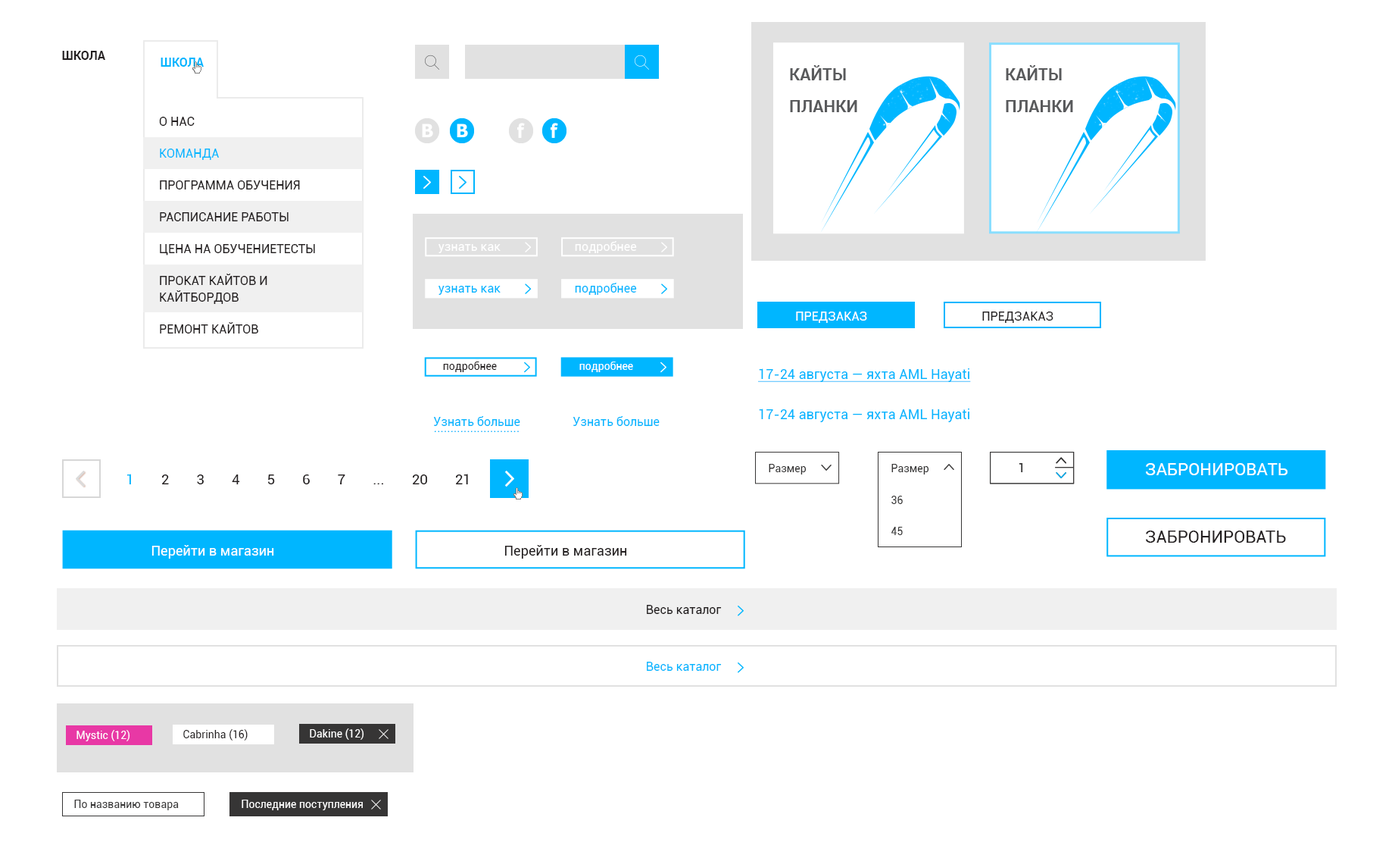
<style>
.page{position:relative;width:1395px;height:855px;background:#ffffff}
.page>*{position:absolute;margin:0}
.t1{font:12.1px "Roboto-Bold";letter-spacing:0.005em;color:#231f20;text-transform:uppercase}
.t2{font:12.1px "Roboto-Bold";letter-spacing:0.005em;color:#00b6ff;text-transform:uppercase}
.t3{font:16.7px/31.8px "Roboto-Bold";letter-spacing:0.005em;color:#595a5c;text-transform:uppercase}
.t4{font:12.1px/31.8px "Roboto-Regular";letter-spacing:0.005em;color:#231f20;text-transform:uppercase}
.t5{font:12.1px/31.8px "Roboto-Regular";letter-spacing:0.005em;color:#00b6ff;text-transform:uppercase}
.t6{font:12.1px/16.7px "Roboto-Regular";letter-spacing:0.005em;color:#231f20;text-transform:uppercase}
.t7{font:12.1px "Roboto-Regular";letter-spacing:0.005em;color:#ffffff}
.t8{font:12.1px "Roboto-Regular";letter-spacing:0.005em;color:#00b6ff}
.t9{font:12.1px "Roboto-Regular";letter-spacing:0.005em;color:#ffffff;text-transform:uppercase}
.t10{font:12.1px "Roboto-Regular";letter-spacing:0.005em;color:#231f20;text-transform:uppercase}
.t11{font:10.6px "Roboto-Regular";letter-spacing:0.005em;color:#231f20}
.t12{font:10.6px "Roboto-Regular";letter-spacing:0.005em;color:#ffffff}
.t13{font:13.6px "Roboto-Regular";letter-spacing:0.005em;color:#00b6ff;text-decoration:underline}
.t14{font:13.6px "Roboto-Regular";letter-spacing:0.005em;color:#00b6ff}
.t15{font:14.4px "Roboto-Regular";color:#231f20}
.t16{font:14.4px "Roboto-Regular";color:#00b6ff}
.t17{font:10.7px "Roboto-Regular";letter-spacing:0.005em;color:#363535}
.t18{font:12.2px "Roboto-Regular";letter-spacing:0.005em;color:#363535}
.t19{font:16.8px "Roboto-Regular";letter-spacing:0.005em;color:#ffffff;text-transform:uppercase}
.t20{font:16.8px "Roboto-Regular";letter-spacing:0.005em;color:#231f20;text-transform:uppercase}
.t21{font:13.6px "Roboto-Regular";letter-spacing:0.005em;color:#ffffff}
.t22{font:13.6px "Roboto-Regular";letter-spacing:0.005em;color:#231f20}
.t23{font:12.1px "Roboto-Regular";letter-spacing:0.005em;color:#231f20}
.t24{font:10.6px "Roboto-Regular";letter-spacing:0.005em;color:#363535}
</style>
<div class="page">
<p class="t1" style="left:62px;top:51px;width:43px;height:9px">Школа</p>
<p class="t2" style="left:161px;top:58px;width:43px;height:9px">Школа</p>
<p class="t3" style="left:790px;top:65px;width:68px;height:47px">Кайты<br>планки</p>
<p class="t3" style="left:1006px;top:65px;width:67px;height:47px">Кайты<br>планки</p>
<p class="t4" style="left:159px;top:117px;width:156px;height:216px">О нас<br><span class="t5">команда<br></span>программа обучения<br>расписание работы<br>цена на обучениетесты <br>прокат кайтов и <span class="t6">кайтбордов <br></span>Ремонт кайтов</p>
<p class="t7" style="left:439px;top:244px;width:62px;height:9px">узнать как</p>
<p class="t7" style="left:575px;top:241px;width:62px;height:12px">подробнее</p>
<p class="t8" style="left:439px;top:286px;width:62px;height:9px">узнать как</p>
<p class="t8" style="left:575px;top:283px;width:62px;height:12px">подробнее</p>
<p class="t9" style="left:796px;top:311px;width:71px;height:12px">Предзаказ</p>
<p class="t10" style="left:983px;top:311px;width:71px;height:12px">Предзаказ</p>
<p class="t11" style="left:443px;top:361px;width:54px;height:11px">подробнее</p>
<p class="t12" style="left:580px;top:361px;width:53px;height:11px">подробнее</p>
<p class="t13" style="left:758px;top:368px;width:213px;height:14px">17-24 августа — яхта AML Hayati</p>
<p class="t14" style="left:759px;top:408px;width:211px;height:14px">17-24 августа — яхта AML Hayati</p>
<p class="t8" style="left:433px;top:416px;width:87px;height:10px">Узнать больше</p>
<p class="t8" style="left:573px;top:416px;width:87px;height:10px">Узнать больше</p>
<p class="t8" style="left:434px;top:430px;width:85px;height:2px">..........................</p>
<p class="t15" style="left:127px;top:473px;width:341px;height:11px"><span class="t16">1</span>       2       3       4       5       6       7       ...       20       21</p>
<p class="t17" style="left:769px;top:464px;width:38px;height:10px">Размер</p>
<p class="t17" style="left:892px;top:464px;width:38px;height:10px">Размер</p>
<p class="t18" style="left:1019px;top:463px;width:4px;height:9px">1</p>
<p class="t18" style="left:1019px;top:463px;width:4px;height:9px">1</p>
<p class="t19" style="left:1146px;top:463px;width:143px;height:12px">Забронировать</p>
<p class="t17" style="left:892px;top:495px;width:11px;height:9px">36</p>
<p class="t17" style="left:892px;top:527px;width:11px;height:8px">45</p>
<p class="t20" style="left:1146px;top:530px;width:140px;height:12px">Забронировать</p>
<p class="t21" style="left:152px;top:545px;width:122px;height:13px">Перейти в магазин</p>
<p class="t22" style="left:505px;top:545px;width:122px;height:13px">Перейти в магазин</p>
<p class="t23" style="left:647px;top:605px;width:75px;height:9px">Весь каталог</p>
<p class="t8" style="left:647px;top:661px;width:75px;height:9px">Весь каталог</p>
<p class="t12" style="left:77px;top:730px;width:53px;height:11px">Mystic (12)</p>
<p class="t11" style="left:183px;top:729px;width:65px;height:11px">Cabrinha (16)</p>
<p class="t12" style="left:310px;top:728px;width:54px;height:11px">Dakine (12)</p>
<p class="t24" style="left:74px;top:799px;width:105px;height:11px">По названию товара</p>
<p class="t12" style="left:242px;top:799px;width:121px;height:11px">Последние поступления</p>
</div>
